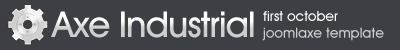
<style>
.page{position:relative;width:400px;height:50px;background:#3c3f44}
.page>*{position:absolute;margin:0}
.t1{font:36px "AvantGardeITCbyBT-Medium";letter-spacing:-0.025em}
.t2{font:14px "AvantGardeITCbyBT-Medium"}
</style>
<div class="page">
<p class="t1" style="left:51px;top:11px;width:203px;height:27px">Axe Industrial</p>
<p class="t2" style="left:262px;top:11px;width:122px;height:30px">first october <br>joomlaxe template</p>
</div>
